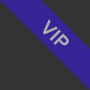
<style>
.page{position:relative;width:90px;height:90px;background:#333333}
.page>*{position:absolute;margin:0}
.t1{font:18.4px "Kartika-Bold";color:#aeaeae}
</style>
<div class="page">
<p class="t1" style="left:43px;top:19px;width:26px;height:27px;rotate:45deg">VIP</p>
</div>
